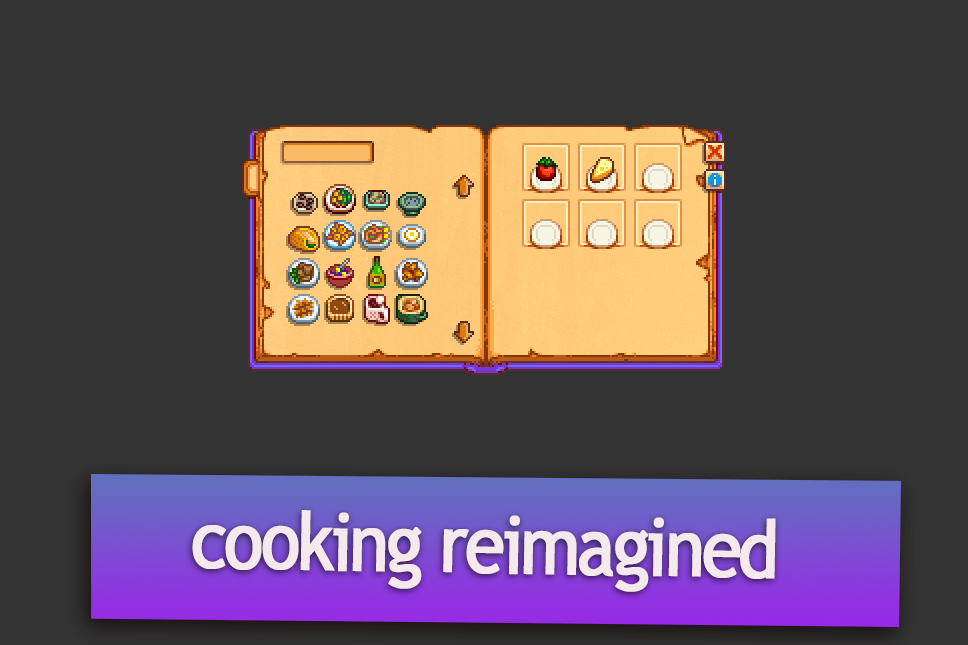
<style>
.page{position:relative;width:968px;height:645px;background:#333333}
.page>*{position:absolute;margin:0}
.t1{font:80px "TrebuchetMS";letter-spacing:-0.06em;color:#f5e9ee;font-weight:bold;scale:0.9 1}
</style>
<div class="page">
<p class="t1" style="left:192px;top:510px;width:584px;height:82px;rotate:1deg">cooking reimagined</p>
</div>
